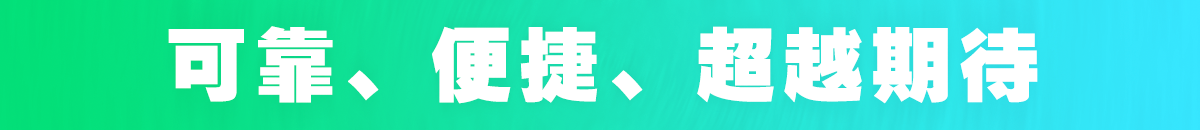
<style>
.page{position:relative;width:1200px;height:130px;background:#ffffff}
.page>*{position:absolute;margin:0}
.t1{font:80px "FZCCHJW--GB1-0";letter-spacing:0.1em;color:#ffffff}
</style>
<div class="page">
<p class="t1" style="left:168px;top:26px;width:870px;height:78px">可靠、便捷、超越期待</p>
</div>
